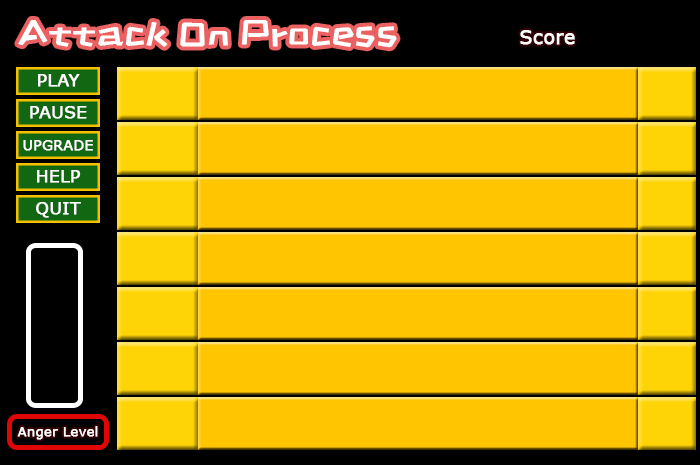
<style>
.page{position:relative;width:700px;height:465px;background:#ffc501}
.page>*{position:absolute;margin:0}
.t1{font:35.1px "ZCOOLKuaiLe-Regular";color:#ffffff;font-weight:bold;scale:1.09 1}
.t2{font:19px "Verdana";color:#ffffff;font-weight:bold}
.t3{font:17px "Verdana";color:#ffffff;font-weight:bold}
.t4{font:14px "Verdana";color:#ffffff;font-weight:bold}
</style>
<div class="page">
<p class="t1" style="left:18px;top:20px;width:379px;height:28px">Attack On Process</p>
<p class="t2" style="left:520px;top:30px;width:55px;height:15px">Score</p>
<p class="t3" style="left:38px;top:74px;width:42px;height:13px">PLAY</p>
<p class="t3" style="left:30px;top:106px;width:57px;height:13px">PAUSE</p>
<p class="t4" style="left:23px;top:140px;width:70px;height:11px">UPGRADE</p>
<p class="t3" style="left:37px;top:170px;width:44px;height:13px">HELP</p>
<p class="t3" style="left:36px;top:202px;width:45px;height:16px">QUIT</p>
</div>
